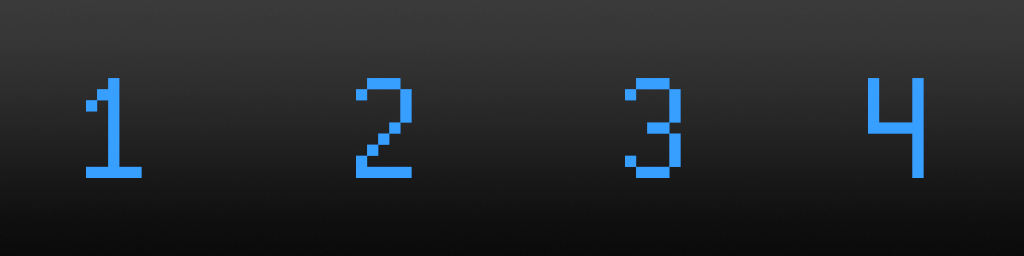
<style>
.page{position:relative;width:1024px;height:256px}
.page>*{position:absolute;margin:0}
.t1{font:110.8px "HighPixel-7";letter-spacing:0.05em;color:#379fff}
</style>
<div class="page">
<p class="t1" style="left:86px;top:78px;width:56px;height:100px">1</p>
<p class="t1" style="left:356px;top:78px;width:56px;height:100px">2</p>
<p class="t1" style="left:625px;top:78px;width:56px;height:100px">3</p>
<p class="t1" style="left:868px;top:78px;width:56px;height:100px">4</p>
</div>
